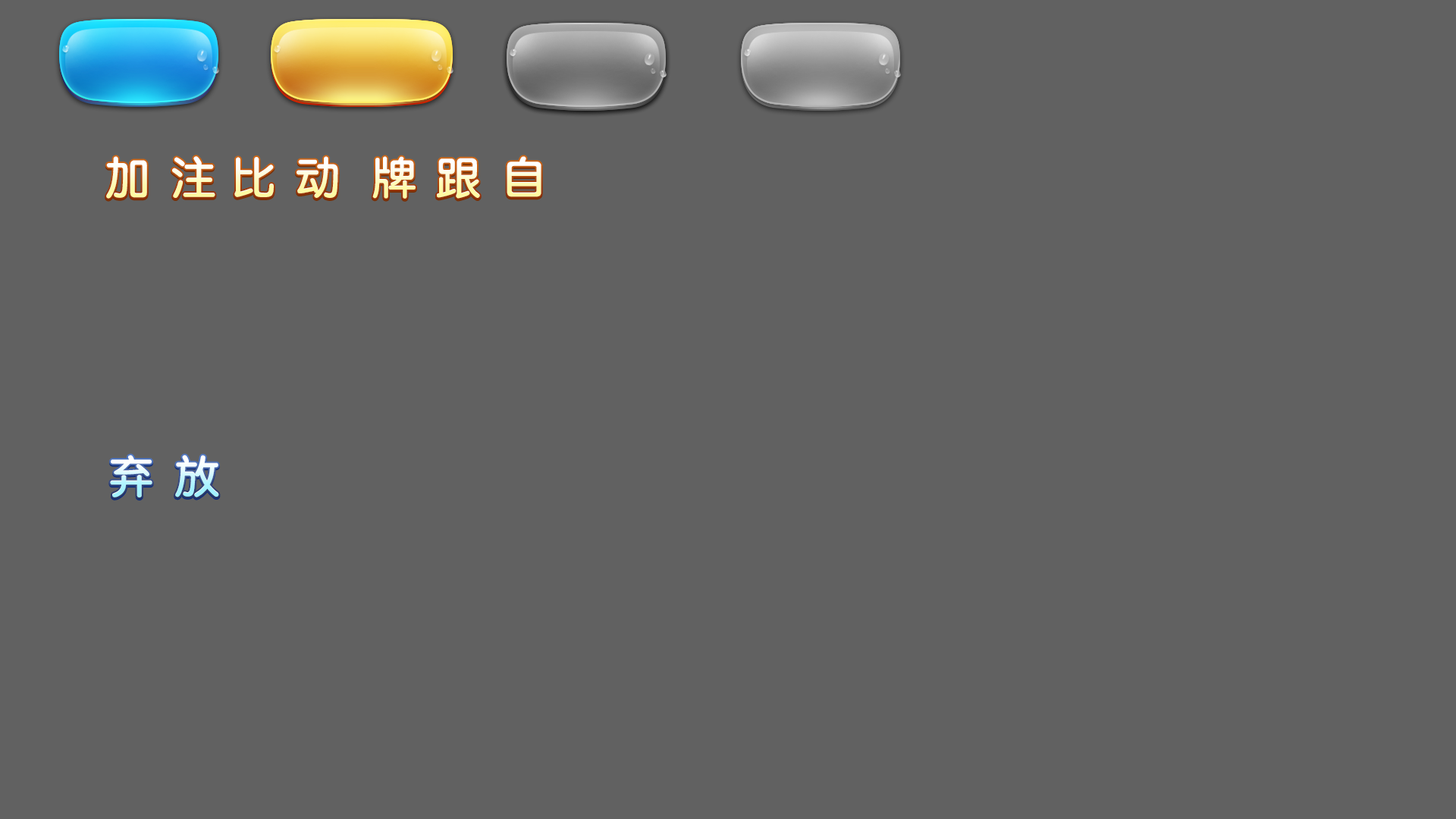
<style>
.page{position:relative;width:1456px;height:819px;background:#616161}
.page>*{position:absolute;margin:0}
.t1{font:45.5px "Tensentype-JiaLiDaYuanJ";letter-spacing:0.05em}
</style>
<div class="page">
<p class="t1" style="left:106px;top:156px;width:41px;height:43px">加</p>
<p class="t1" style="left:172px;top:156px;width:43px;height:42px">注</p>
<p class="t1" style="left:234px;top:157px;width:40px;height:40px">比</p>
<p class="t1" style="left:297px;top:156px;width:41px;height:42px">动</p>
<p class="t1" style="left:372px;top:156px;width:44px;height:43px">牌</p>
<p class="t1" style="left:437px;top:158px;width:43px;height:41px">跟</p>
<p class="t1" style="left:507px;top:156px;width:34px;height:41px">自</p>
<p class="t1" style="left:110px;top:455px;width:42px;height:42px">弃</p>
<p class="t1" style="left:175px;top:455px;width:44px;height:42px">放</p>
</div>
